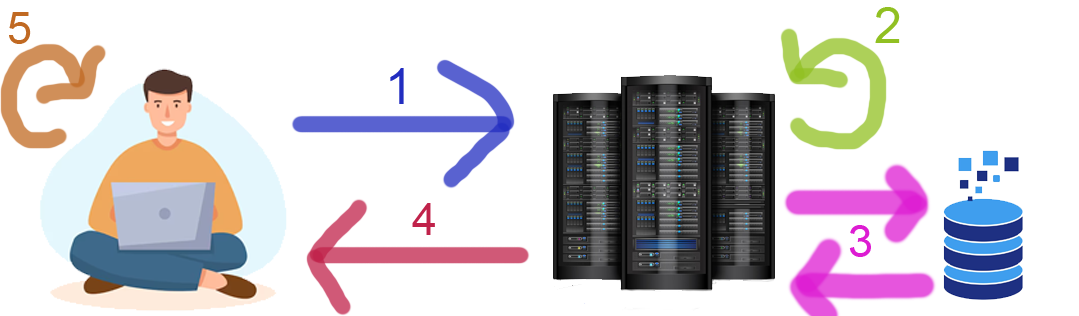
<style>
.page{position:relative;width:1079px;height:316px;background:#ffffff}
.page>*{position:absolute;margin:0}
.t1{font:45.1px "ArialMT";letter-spacing:0.01em;color:#c06922}
.t2{font:50px "ArialMT";letter-spacing:0.01em;color:#91c022}
.t3{font:50px "ArialMT";letter-spacing:0.01em;color:#222dc0}
.t4{font:45.1px "ArialMT";letter-spacing:0.01em;color:#c0224a}
.t5{font:45.1px "ArialMT";letter-spacing:0.01em;color:#dd1cd2}
</style>
<div class="page">
<p class="t1" style="left:9px;top:12px;width:22px;height:32px">5</p>
<p class="t2" style="left:875px;top:7px;width:25px;height:36px">2</p>
<p class="t3" style="left:390px;top:68px;width:14px;height:36px">1</p>
<p class="t4" style="left:412px;top:203px;width:23px;height:32px">4</p>
<p class="t5" style="left:849px;top:225px;width:22px;height:32px">3</p>
</div>
